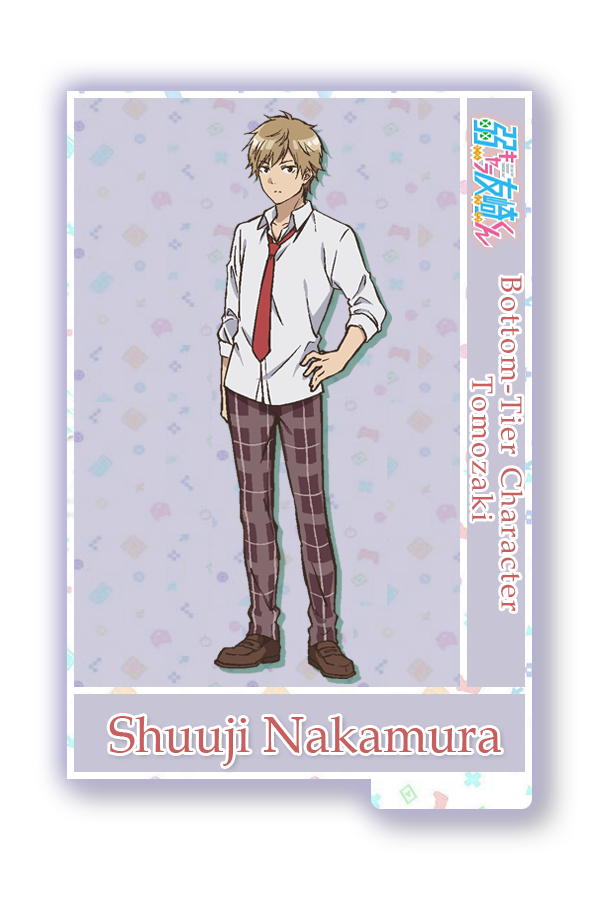
<style>
.page{position:relative;width:600px;height:900px;background:#ffffff}
.page>*{position:absolute;margin:0}
.t1{font:29.2px/29.2px "BookAntiqua";letter-spacing:0.08em;color:#c65f5d}
.t2{font:50px "BookAntiqua";color:#c65f5d}
</style>
<div class="page">
<p class="t1" style="left:471px;top:275px;width:52px;height:336px;text-align:center;rotate:90deg">Bottom-Tier Character <br>Tomozaki</p>
<p class="t2" style="left:109px;top:716px;width:392px;height:50px">Shuuji Nakamura</p>
</div>
